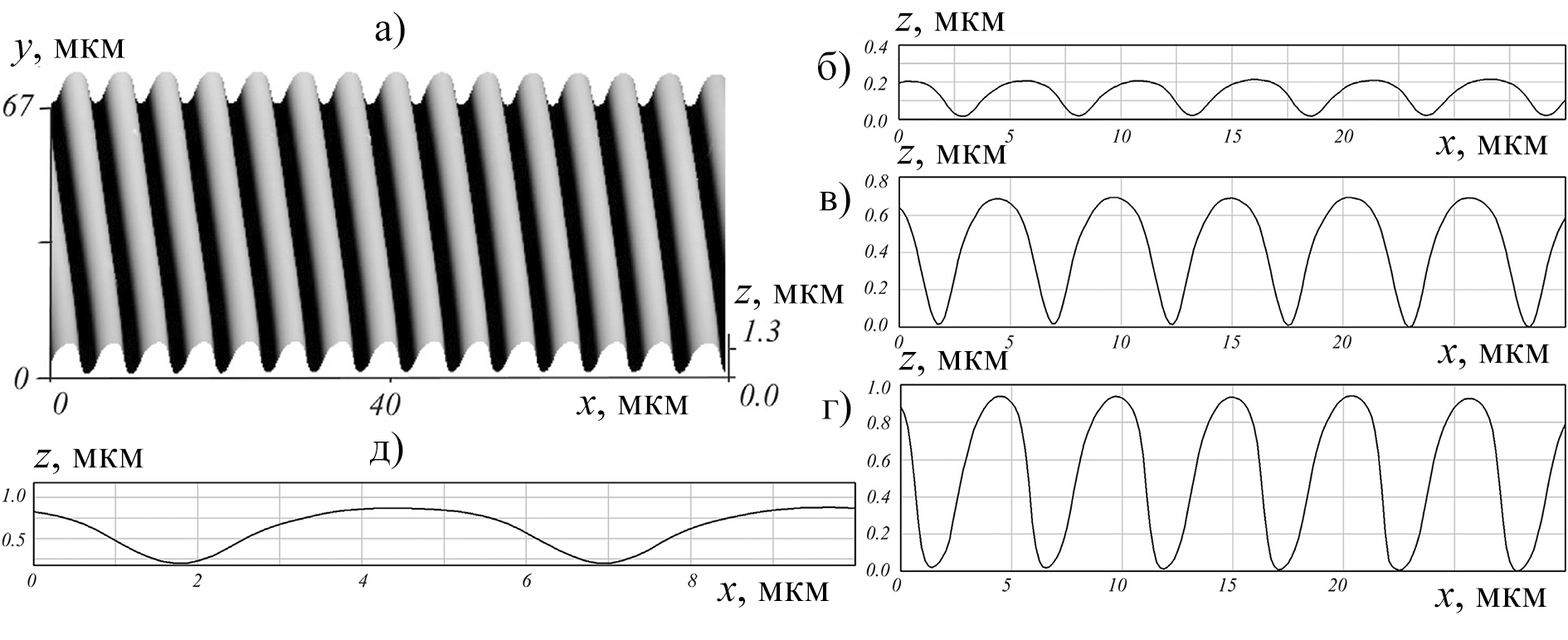
<style>
.page{position:relative;width:1568px;height:640px;background:#ffffff}
.page>*{position:absolute;margin:0}
.t1{font:41.5px "TimesNewRomanPSMT";color:#000000}
.t2{font:41.5px "TimesNewRomanPS-ItalicMT";color:#000000}
</style>
<div class="page">
<p class="t1" style="left:375px;top:12px;width:30px;height:38px">а)</p>
<p class="t1" style="left:895px;top:12px;width:111px;height:26px"><span class="t2">z</span>, мкм</p>
<p class="t1" style="left:10px;top:39px;width:115px;height:28px"><span class="t2">y</span>, мкм</p>
<p class="t1" style="left:818px;top:51px;width:32px;height:38px">б)</p>
<p class="t1" style="left:1435px;top:135px;width:113px;height:26px"><span class="t2">x</span>, мкм</p>
<p class="t1" style="left:897px;top:144px;width:110px;height:27px"><span class="t2">z</span>, мкм</p>
<p class="t1" style="left:819px;top:181px;width:31px;height:39px">в)</p>
<p class="t1" style="left:734px;top:284px;width:111px;height:26px"><span class="t2">z</span>, мкм</p>
<p class="t1" style="left:898px;top:350px;width:111px;height:27px"><span class="t2">z</span>, мкм</p>
<p class="t1" style="left:1437px;top:343px;width:113px;height:27px"><span class="t2">x</span>, мкм</p>
<p class="t1" style="left:822px;top:390px;width:29px;height:38px">г)</p>
<p class="t1" style="left:576px;top:395px;width:113px;height:26px"><span class="t2">x</span>, мкм</p>
<p class="t1" style="left:370px;top:431px;width:33px;height:39px">д)</p>
<p class="t1" style="left:33px;top:448px;width:111px;height:27px"><span class="t2">z</span>, мкм</p>
<p class="t1" style="left:717px;top:582px;width:113px;height:25px"><span class="t2">x</span>, мкм</p>
<p class="t1" style="left:1434px;top:587px;width:112px;height:26px"><span class="t2">x</span>, мкм</p>
</div>
